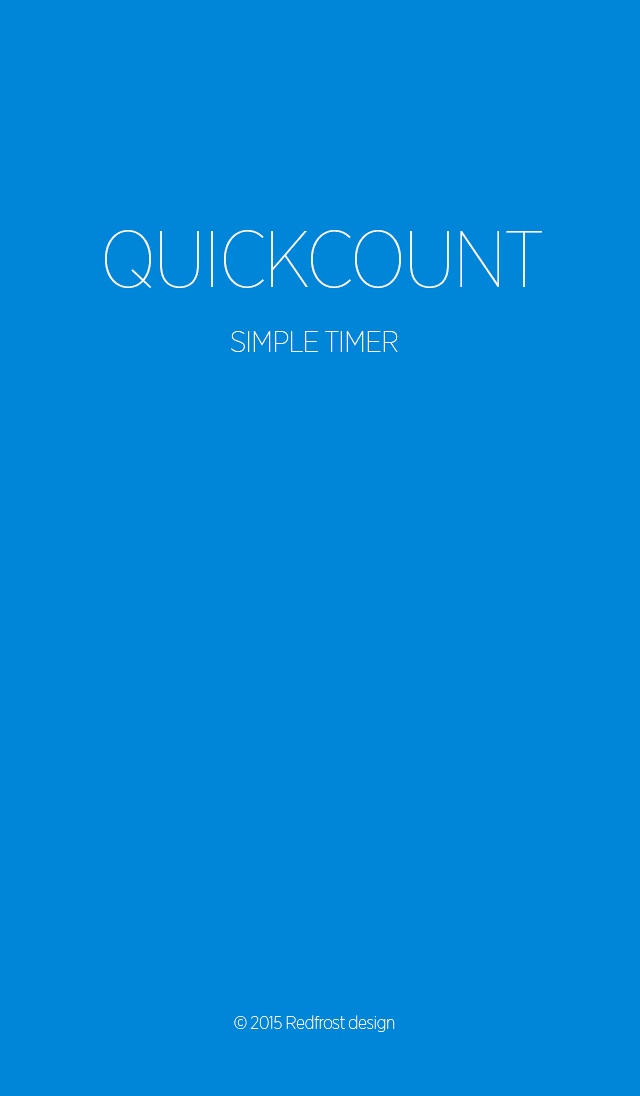
<style>
.page{position:relative;width:640px;height:1096px;background:#0086d9}
.page>*{position:absolute;margin:0}
.t1{font:80px "GothamNarrow-Thin";letter-spacing:-0.025em;color:#ffffff}
.t2{font:30px "GothamNarrow-Thin";letter-spacing:-0.025em;color:#ffffff}
.t3{font:18px "GothamNarrow-Thin";letter-spacing:-0.025em;color:#ffffff}
</style>
<div class="page">
<p class="t1" style="left:105px;top:230px;width:437px;height:58px">QUICKCOUNT</p>
<p class="t2" style="left:231px;top:331px;width:167px;height:21px">SIMPLE TIMER</p>
<p class="t3" style="left:234px;top:1015px;width:161px;height:17px">© 2015 Redfrost design</p>
</div>
